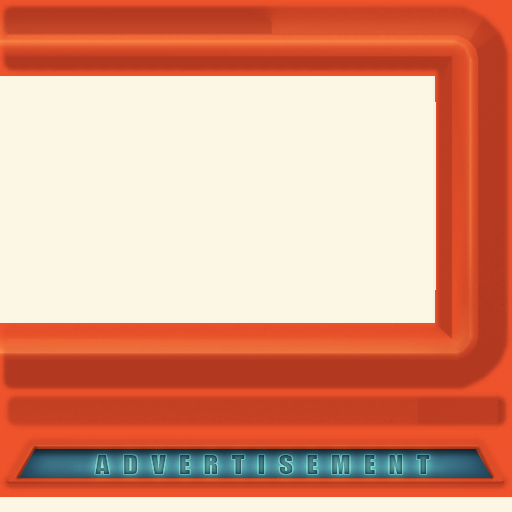
<style>
.page{position:relative;width:512px;height:512px;background:#fcf7e5}
.page>*{position:absolute;margin:0}
.t1{font:24px "Impact";letter-spacing:0.5em;scale:1.12 1}
</style>
<div class="page">
<p class="t1" style="left:95px;top:455px;width:335px;height:19px">ADVERTISEMENT</p>
</div>
